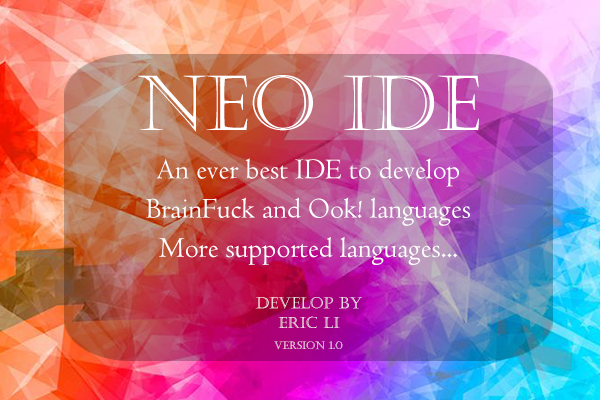
<style>
.page{position:relative;width:600px;height:400px}
.page>*{position:absolute;margin:0}
.t1{font:75.7px "Castellar";color:#ffffff}
.t2{font:29.5px/39.3px "Centaur";color:#ffffff}
.t3{font:15.6px "Castellar";color:#ffffff}
.t4{font:10.6px "Castellar"}
</style>
<div class="page">
<p class="t1" style="left:138px;top:75px;width:341px;height:57px">Neo ide</p>
<p class="t2" style="left:146px;top:158px;width:324px;height:107px;text-align:center">An ever best IDE to develop<br>BrainFuck and Ook! languages<br>More supported languages...</p>
<p class="t3" style="left:255px;top:297px;width:107px;height:12px">develop by</p>
<p class="t3" style="left:278px;top:316px;width:62px;height:12px">eric li</p>
<p class="t4" style="left:274px;top:341px;width:69px;height:9px">version 1.0</p>
</div>
